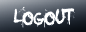
<style>
.page{position:relative;width:86px;height:32px}
.page>*{position:absolute;margin:0}
.t1{font:33.3px "YouMurdererBB";color:#ffffff;scale:0.84 1}
</style>
<div class="page">
<p class="t1" style="left:13px;top:6px;width:62px;height:22px">Logout</p>
</div>
